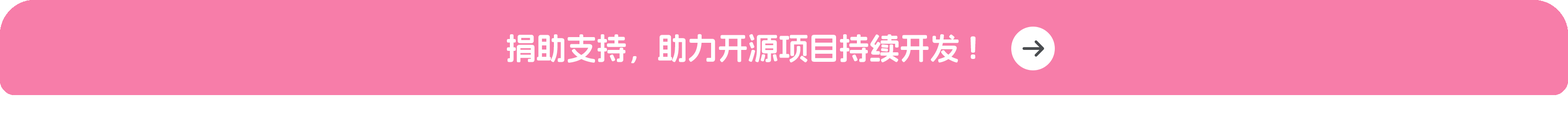
<style>
.page{position:relative;width:1568px;height:116px;background:#f77da9}
.page>*{position:absolute;margin:0}
.t1{font:30.3px "AlimamaFangYuanTi-Bold";color:#ffffff}
</style>
<div class="page">
<p class="t1" style="left:507px;top:34px;width:469px;height:29px">捐助支持，助力开源项目持续开发!</p>
</div>
